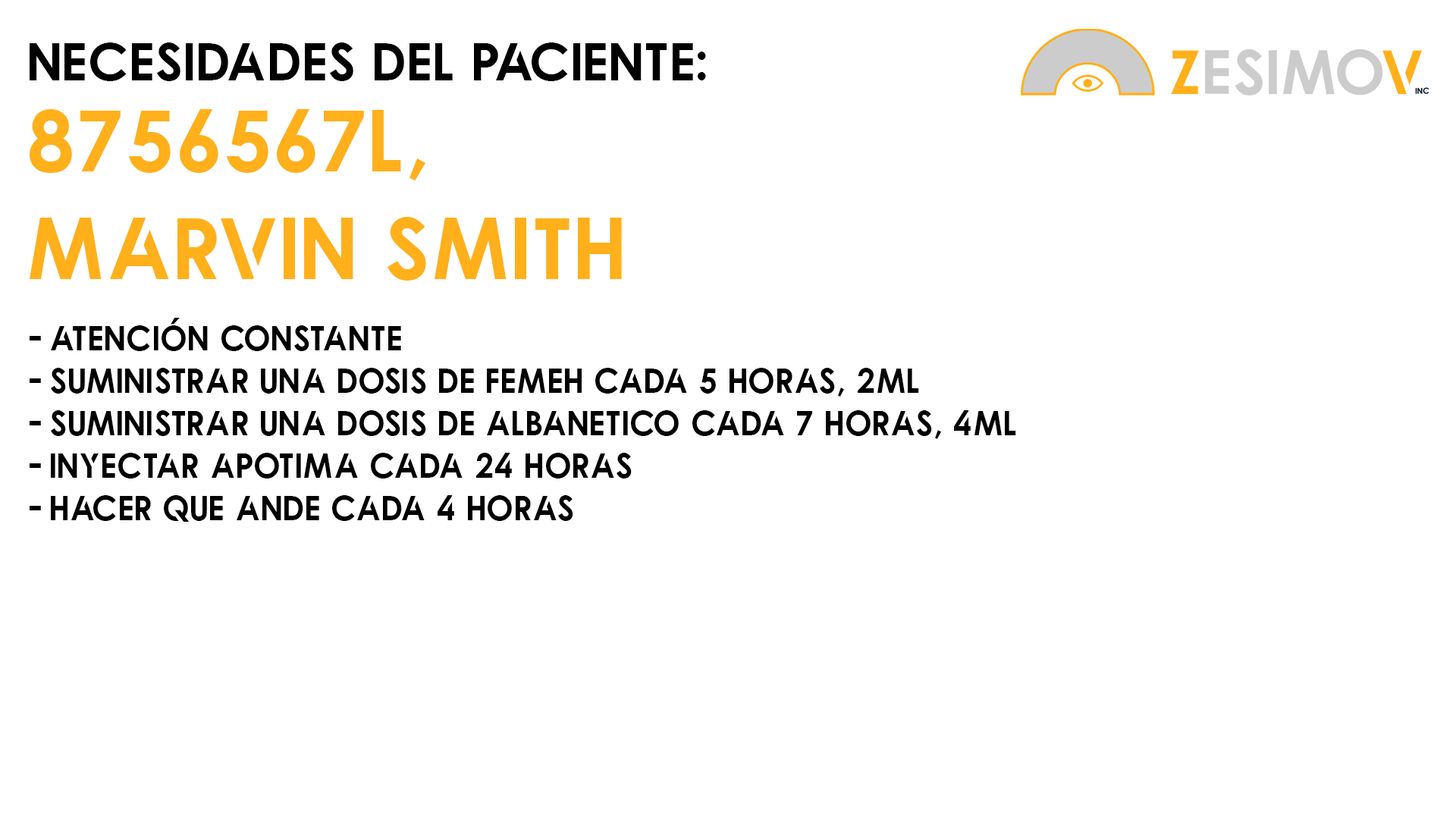
<style>
.page{position:relative;width:1456px;height:819px;background:#ffffff}
.page>*{position:absolute;margin:0}
.t1{font:54.7px "Qualy-Bold";color:#000000}
.t2{font:89.5px "Qualy-Bold";color:#ffb01a}
.t3{font:35.4px "Qualy-Bold";color:#000000}
</style>
<div class="page">
<p class="t1" style="left:30px;top:42px;width:676px;height:39px">Necesidades del paciente:</p>
<p class="t2" style="left:30px;top:109px;width:592px;height:172px">8756567L, <br>Marvin SMITH</p>
<p class="t3" style="left:30px;top:318px;width:986px;height:204px">- Atención constante<br>- Suministrar una dosis de femeh cada 5 horas, 2ml<br>- Suministrar una dosis de albanetico cada 7 horas, 4ml<br>- inyectar apotima cada 24 horas<br>- hacer que ande cada 4 horas</p>
</div>
